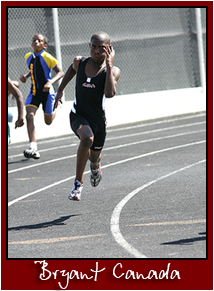
<style>
.page{position:relative;width:214px;height:291px}
.page>*{position:absolute;margin:0}
.t1{font:25px "BetinaScript";color:#ffffff}
</style>
<div class="page">
<p class="t1" style="left:34px;top:260px;width:147px;height:29px">Bryant Canada</p>
</div>
